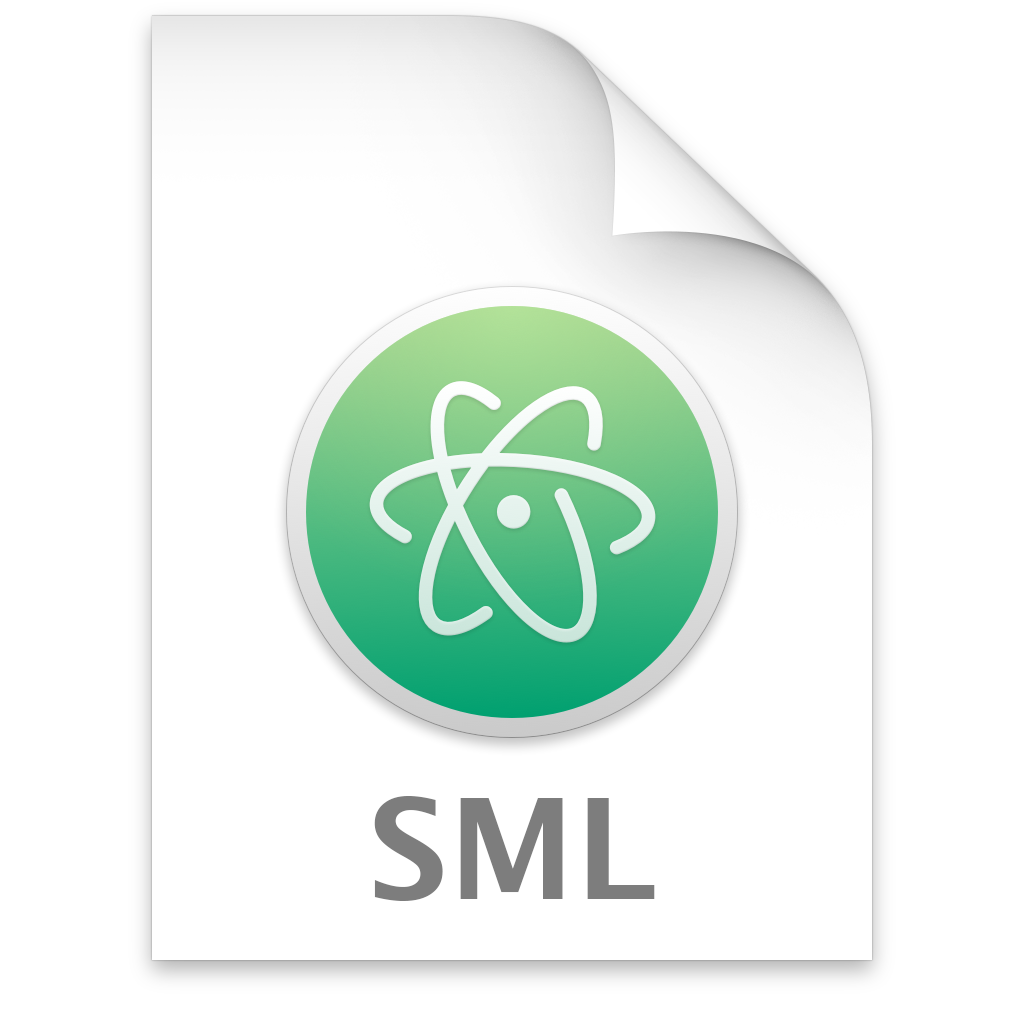
<style>
.page{position:relative;width:1024px;height:1024px;background:#ffffff}
.page>*{position:absolute;margin:0}
.t1{font:140px "LucidaGrande-Bold";color:#7d7d7d}
</style>
<div class="page">
<p class="t1" style="left:374px;top:796px;width:281px;height:105px">SML</p>
</div>
